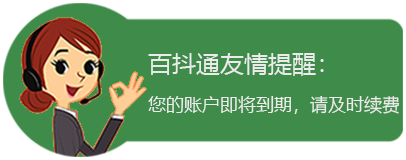
<style>
.page{position:relative;width:406px;height:160px;background:#3f8b49}
.page>*{position:absolute;margin:0}
.t1{font:18px/22px "MicrosoftYaHei";color:#ebebeb}
.t2{font:24px/22px "MicrosoftYaHei";color:#ebebeb}
</style>
<div class="page">
<p class="t1" style="left:148px;top:53px;width:252px;height:61px"><span class="t2">百抖通友情提醒：<br><br></span>您的账户即将到期，请及时续费</p>
</div>
